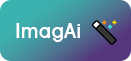
<style>
.page{position:relative;width:131px;height:61px}
.page>*{position:absolute;margin:0}
.t1{font:20.5px "AvantGardeITCbyBT-Demi";letter-spacing:0.04em;color:#ffffff;scale:0.91 1}
</style>
<div class="page">
<p class="t1" style="left:16px;top:23px;width:64px;height:19px">ImagAi</p>
</div>
